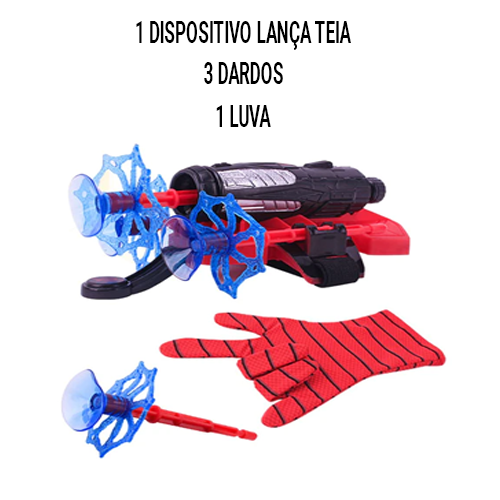
<style>
.page{position:relative;width:500px;height:500px;background:#ffffff}
.page>*{position:absolute;margin:0}
.t1{font:29.6px "Roboto-Bold";color:#000000;font-variant:small-caps;scale:0.57 1}
</style>
<div class="page">
<p class="t1" style="left:136px;top:21px;width:215px;height:29px">1 DISPOSITIVO LANÇA TEIA</p>
<p class="t1" style="left:204px;top:62px;width:79px;height:22px">3 DARDOS</p>
<p class="t1" style="left:216px;top:105px;width:55px;height:22px">1 LUVA</p>
</div>
